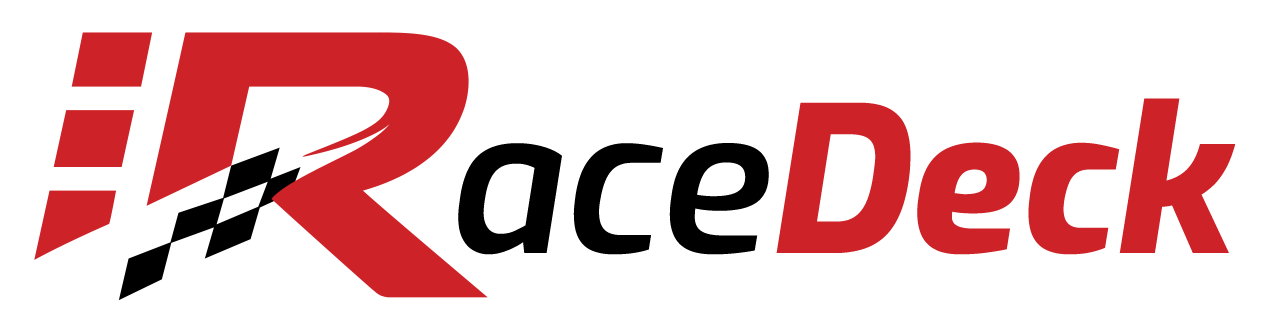
<style>
.page{position:relative;width:1270px;height:332px;background:#ffffff}
.page>*{position:absolute;margin:0}
.t1{font:202.4px "Exo-ExtraBoldItalic";color:#cd2227}
.t2{font:202.4px "Exo-SemiBoldItalic";color:#000000}
</style>
<div class="page">
<p class="t1" style="left:458px;top:98px;width:778px;height:157px"><span class="t2">ace</span>Deck</p>
</div>
